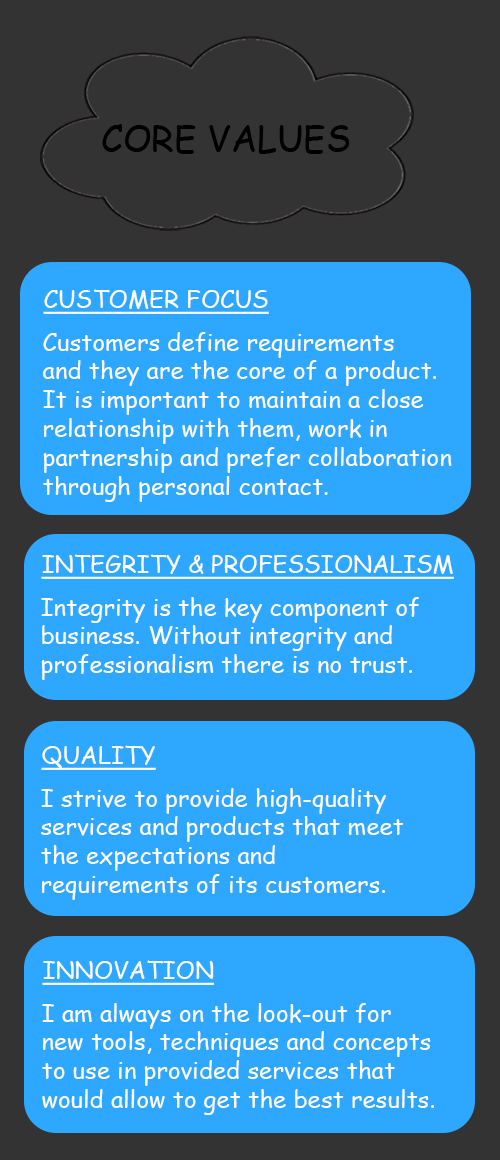
<style>
.page{position:relative;width:500px;height:1160px;background:#2da7ff}
.page>*{position:absolute;margin:0}
.t1{font:36px "ComicSansMS";color:#000000}
.t2{font:24px "ComicSansMS";color:#ffffff;text-decoration:underline}
.t3{font:24px "ComicSansMS";color:#ffffff}
.t4{font:24px "ComicSansMS";color:#fefefe}
</style>
<div class="page">
<p class="t1" style="left:102px;top:124px;width:248px;height:30px">CORE VALUES</p>
<p class="t2" style="left:43px;top:289px;width:226px;height:25px">CUSTOMER FOCUS</p>
<p class="t3" style="left:43px;top:332px;width:409px;height:170px">Customers define requirements<br>and they are the core of a product.<br>It is important to maintain a close<br>relationship with them, work in<br>partnership and prefer collaboration<br>through personal contact.</p>
<p class="t2" style="left:41px;top:554px;width:413px;height:25px">INTEGRITY &amp; PROFESSIONALISM</p>
<p class="t3" style="left:41px;top:597px;width:378px;height:83px">Integrity is the key component of<br>business. Without integrity and<br>professionalism there is no trust.</p>
<p class="t2" style="left:41px;top:745px;width:115px;height:25px">QUALITY</p>
<p class="t4" style="left:41px;top:788px;width:363px;height:112px">I strive to provide high-quality<br>services and products that meet<br>the expectations and<br>requirements of its customers.</p>
<p class="t2" style="left:42px;top:960px;width:172px;height:25px">INNOVATION</p>
<p class="t3" style="left:42px;top:1003px;width:392px;height:112px">I am always on the look-out for<br>new tools, techniques and concepts<br>to use in provided services that<br>would allow to get the best results.</p>
</div>
